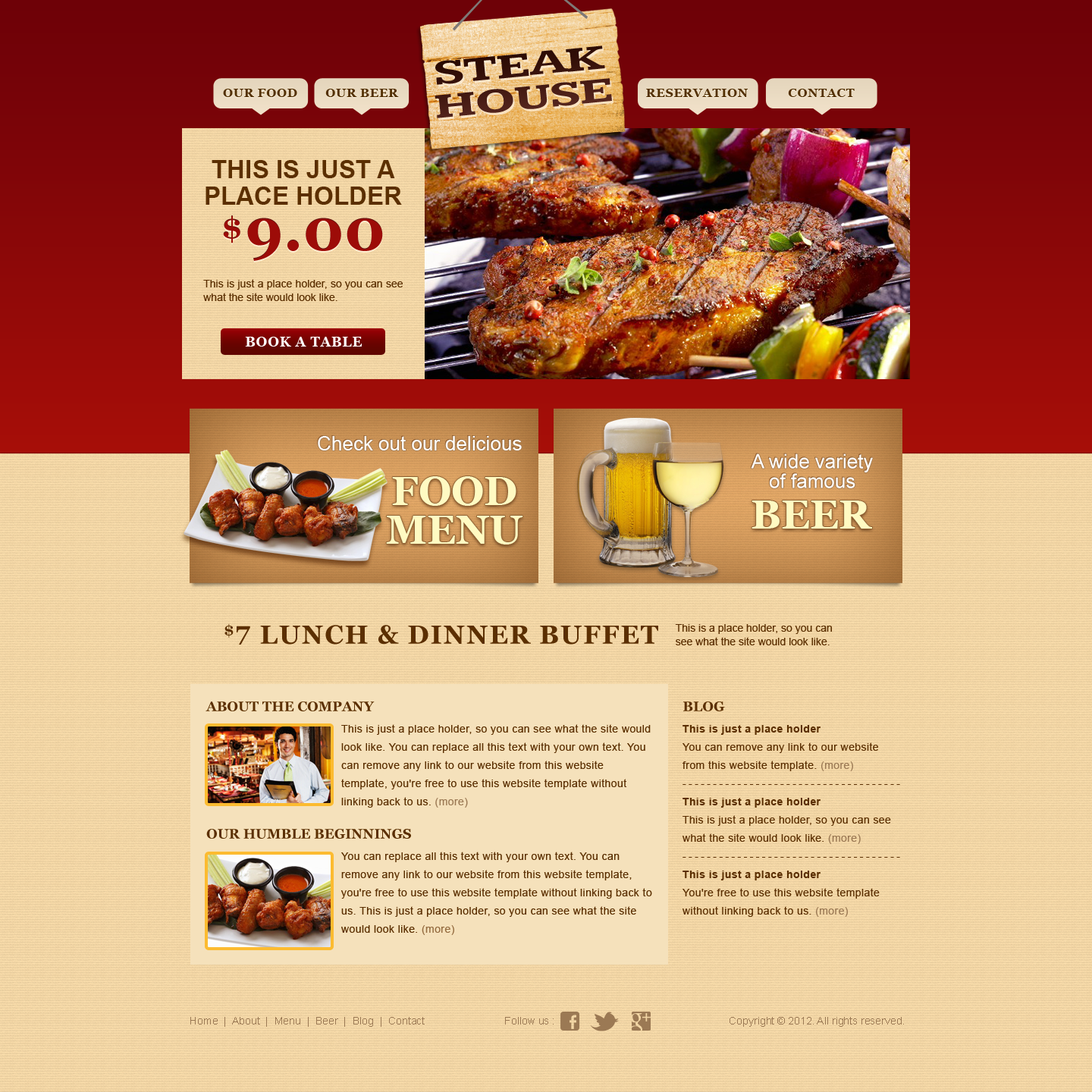
<style>
.page{position:relative;width:1092px;height:1092px}
.page>*{position:absolute;margin:0}
.t1{font:12.1px "Georgia-Bold";letter-spacing:0.04em;color:#533001;text-transform:uppercase}
.t2{font:25.1px/26.5px "Arial-BoldMT";color:#5b2f01;text-transform:uppercase}
.t3{font:30.6px "Georgia-Bold";letter-spacing:0.1em;color:#9d0c08}
.t4{font:59px "Georgia-Bold";color:#9d0c08}
.t5{font:10.6px/13.6px "ArialMT";color:#5b2f01}
.t6{font:13.5px "Georgia-Bold";letter-spacing:0.05em;color:#ffffff;text-transform:uppercase}
.t7{font:19.7px "ArialMT";color:#ffffff}
.t8{font:19.7px/19.7px "ArialMT";color:#ffffff}
.t9{font:40.1px/38.4px "Georgia-Bold";color:#fffac2;text-transform:uppercase}
.t10{font:40.1px "Georgia-Bold";color:#fffac2;text-transform:uppercase}
.t11{font:15.2px "Georgia-Bold";letter-spacing:0.05em;color:#5b2f01;text-transform:uppercase}
.t12{font:25.9px "Georgia-Bold";letter-spacing:0.05em;color:#5b2f01;text-transform:uppercase}
.t13{font:13.6px "Georgia-Bold";color:#5b2f01;text-transform:uppercase}
.t14{font:10.6px/18.2px "ArialMT";letter-spacing:0.03em;color:#5b2f01}
.t15{font:10.6px/18.2px "ArialMT";letter-spacing:0.03em;color:#9b7954}
.t16{font:10.6px/18.2px "Arial-BoldMT";letter-spacing:0.03em;color:#5b2f01}
.t17{font:10.6px/18.2px "ArialMT";letter-spacing:0.21em;color:#5b2f01}
.t18{font:10.6px/18.2px "ArialMT";letter-spacing:0.03em;color:#946b3f}
.t19{font:10.6px "ArialMT";color:#9b7954}
</style>
<div class="page">
<p class="t1" style="left:223px;top:89px;width:74px;height:8px">our food</p>
<p class="t1" style="left:325px;top:89px;width:74px;height:8px">our beer</p>
<p class="t1" style="left:646px;top:89px;width:102px;height:8px">reservation</p>
<p class="t1" style="left:788px;top:89px;width:67px;height:8px">contact</p>
<p class="t2" style="left:206px;top:160px;width:196px;height:45px;text-align:center">This is just a<br>place holder</p>
<p class="t3" style="left:223px;top:215px;width:17px;height:28px">$</p>
<p class="t4" style="left:247px;top:218px;width:136px;height:43px">9.00</p>
<p class="t5" style="left:203px;top:279px;width:200px;height:22px;text-align:justify">This is just a place holder, so you can see what the site would look like.</p>
<p class="t6" style="left:245px;top:337px;width:117px;height:10px">Book a table</p>
<p class="t7" style="left:318px;top:436px;width:204px;height:14px">Check out our delicious</p>
<p class="t8" style="left:751px;top:453px;width:122px;height:35px;text-align:center">A wide variety<br>of famous</p>
<p class="t9" style="left:386px;top:476px;width:137px;height:68px;text-align:center">Food<br>menu</p>
<p class="t10" style="left:751px;top:500px;width:121px;height:29px">beer</p>
<p class="t11" style="left:224px;top:623px;width:10px;height:15px">$</p>
<p class="t12" style="left:237px;top:626px;width:13px;height:19px">7</p>
<p class="t12" style="left:260px;top:625px;width:398px;height:20px">Lunch &amp; dinner buffeT</p>
<p class="t5" style="left:675px;top:624px;width:157px;height:21px">This is a place holder, so you can<br>see what the site would look like.</p>
<p class="t13" style="left:206px;top:701px;width:169px;height:10px">About the company</p>
<p class="t13" style="left:683px;top:701px;width:42px;height:10px">blog</p>
<p class="t14" style="left:341px;top:724px;width:310px;height:84px">This is just a place holder, so you can see what the site would look like. You can replace all this text with your own text. You can remove any link to our website from this website template, you're free to use this website template without linking back to us. <span class="t15">(more)</span></p>
<p class="t14" style="left:682px;top:725px;width:218px;height:192px"><span class="t16">This is just a place holder<br></span>You can remove any link to our website from this website template. <span class="t15">(more)<br></span><span class="t17">------------------------------------<br></span><span class="t16">This is just a place holder<br></span>This is just a place holder, so you can see what the site would look like. <span class="t15">(more)<br></span><span class="t17">------------------------------------<br></span><span class="t16">This is just a place holder<br></span>You're free to use this website template without linking back to us. <span class="t15">(more)</span></p>
<p class="t13" style="left:206px;top:829px;width:205px;height:10px">OUR humble beginnings</p>
<p class="t14" style="left:340px;top:852px;width:312px;height:83px">You can replace all this text with your own text. You can remove any link to our website from this website template, you're free to use this website template without linking back to us. This is just a place holder, so you can see what the site would look like. <span class="t18">(more)</span></p>
<p class="t19" style="left:190px;top:1017px;width:364px;height:10px">Home  |  About  |  Menu  |  Beer  |  Blog  |  Contact                           Follow us :</p>
<p class="t19" style="left:730px;top:1017px;width:174px;height:10px">Copyright © 2012. All rights reserved.</p>
</div>
